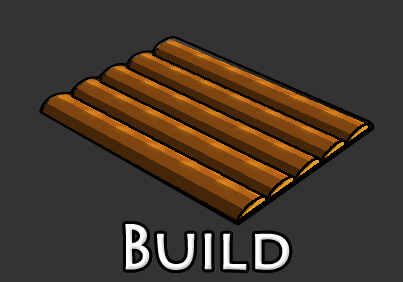
<style>
.page{position:relative;width:403px;height:282px;background:#333333}
.page>*{position:absolute;margin:0}
.t1{font:59px "Pericles";color:#ffffff}
</style>
<div class="page">
<p class="t1" style="left:125px;top:224px;width:165px;height:46px">Build</p>
</div>
